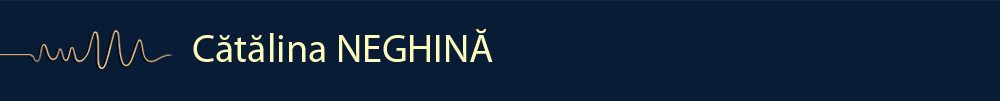
<style>
.page{position:relative;width:1000px;height:101px;background:#091c35}
.page>*{position:absolute;margin:0}
.t1{font:40px "MyriadPro-Regular";color:#fffebd}
</style>
<div class="page">
<p class="t1" style="left:193px;top:29px;width:300px;height:33px">Cătălina NEGHINĂ</p>
</div>
